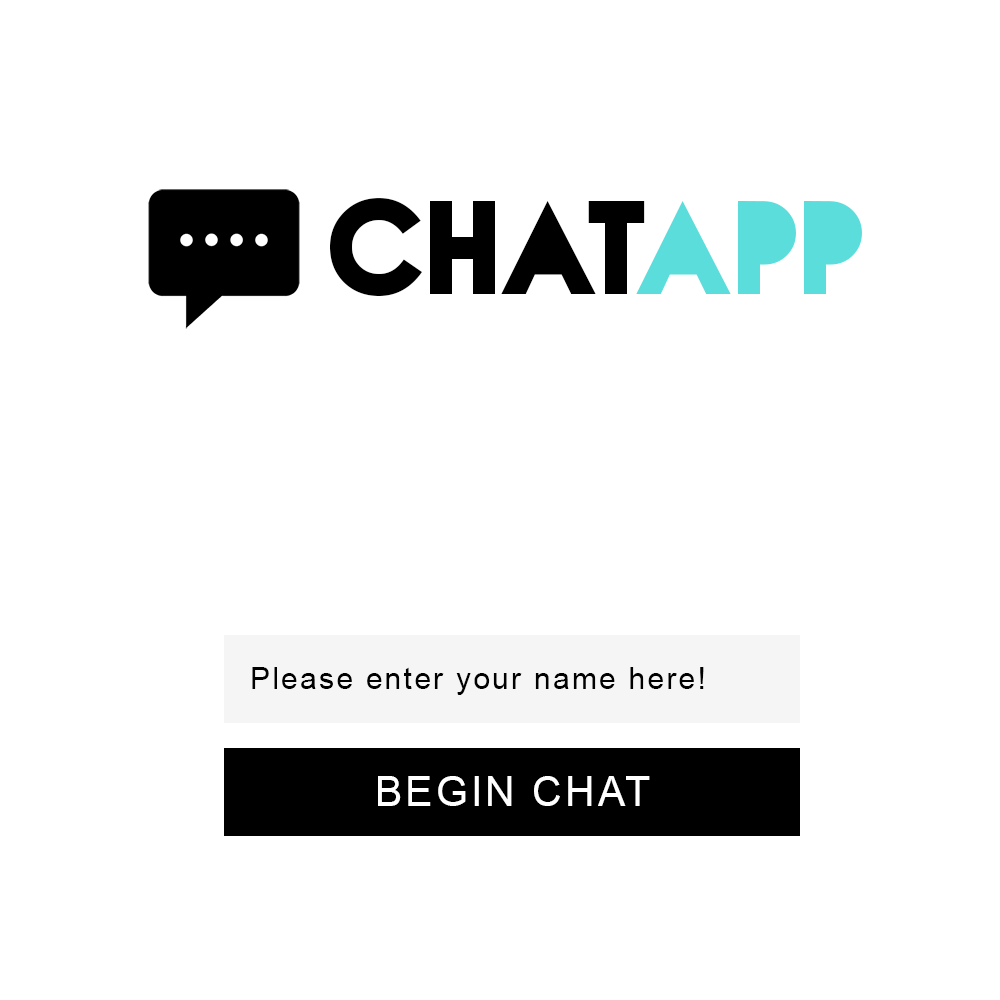
<style>
.page{position:relative;width:1000px;height:1000px;background:#ffffff}
.page>*{position:absolute;margin:0}
.t1{font:165px "NovaSOLID-SOLID";letter-spacing:0.075em;color:#000000}
.t2{font:165px "NovaSOLID-SOLID";letter-spacing:0.075em;color:#5bdddb}
.t3{font:30px "ArialMT";letter-spacing:0.075em;color:#000000}
.t4{font:41px "ArialMT";letter-spacing:0.075em;color:#ffffff}
</style>
<div class="page">
<p class="t1" style="left:330px;top:198px;width:532px;height:98px">CHAT<span class="t2">APP</span></p>
<p class="t3" style="left:252px;top:667px;width:452px;height:28px">Please enter your name here!</p>
<p class="t4" style="left:378px;top:776px;width:272px;height:30px">BEGIN CHAT</p>
</div>
